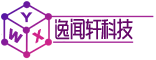
<style>
.page{position:relative;width:156px;height:60px;background:#ffffff}
.page>*{position:absolute;margin:0}
.t1{font:13.3px "Verdana-Bold";color:#6b189f}
.t2{font:13.3px "Verdana-Bold";color:#851b99;font-weight:bold}
.t3{font:13.3px "Verdana-Bold";color:#d02489;font-weight:bold}
.t4{font:22px "MFYueHei_Noncommercial-Regular";letter-spacing:-0.08em;color:#650868;font-weight:bold;scale:0.75 1}
</style>
<div class="page">
<p class="t1" style="left:20px;top:12px;width:13px;height:11px">Y</p>
<p class="t2" style="left:9px;top:28px;width:14px;height:15px;rotate:30deg">W</p>
<p class="t3" style="left:32px;top:29px;width:13px;height:15px;rotate:-30deg">X</p>
<p class="t4" style="left:55px;top:18px;width:78px;height:22px">逸闻轩科技</p>
</div>
